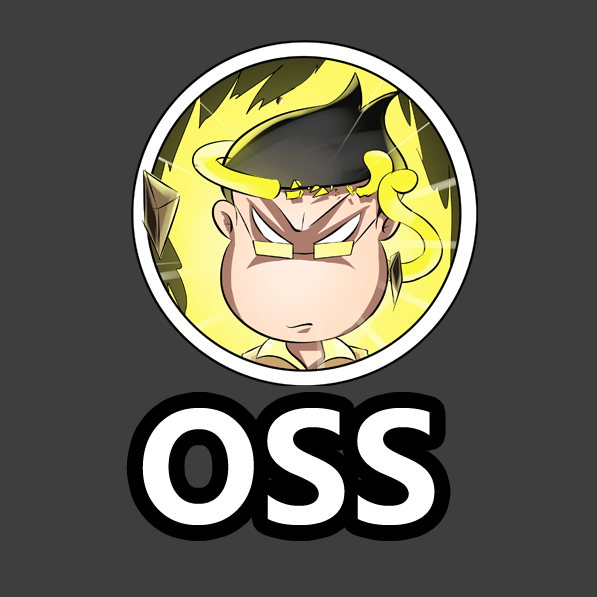
<style>
.page{position:relative;width:597px;height:597px;background:#3e3e3e}
.page>*{position:absolute;margin:0}
.t1{font:149.8px "MicrosoftYaHei-Bold";color:#ffffff}
</style>
<div class="page">
<p class="t1" style="left:142px;top:408px;width:293px;height:117px">OSS</p>
</div>
